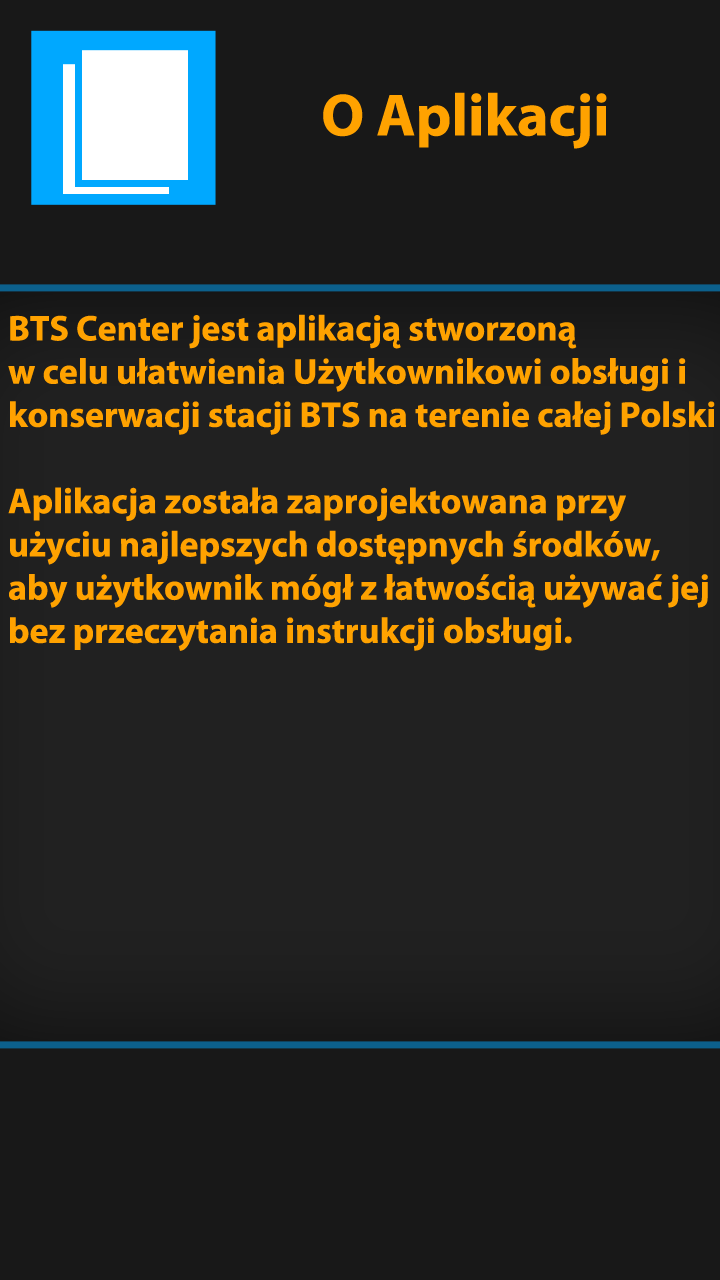
<style>
.page{position:relative;width:720px;height:1280px;background:#181818}
.page>*{position:absolute;margin:0}
.t1{font:60px "MyriadPro-Bold";color:#ffa200}
.t2{font:36px "MyriadPro-Bold";color:#ffa200}
</style>
<div class="page">
<p class="t1" style="left:323px;top:92px;width:284px;height:57px">O Aplikacji</p>
<p class="t2" style="left:8px;top:314px;width:707px;height:337px">BTS Center jest aplikacją stworzoną <br>w celu ułatwienia Użytkownikowi obsługi i<br>konserwacji stacji BTS na terenie całej Polski<br><br>Aplikacja została zaprojektowana przy <br>użyciu najlepszych dostępnych środków, <br>aby użytkownik mógł z łatwością używać jej <br>bez przeczytania instrukcji obsługi.</p>
</div>
